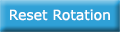
<style>
.page{position:relative;width:120px;height:32px;background:#2fa1d7}
.page>*{position:absolute;margin:0}
.t1{font:14px "Verdana";color:#ffffff}
</style>
<div class="page">
<p class="t1" style="left:10px;top:9px;width:100px;height:12px">Reset Rotation</p>
</div>
